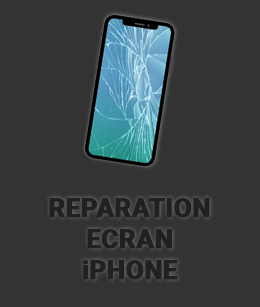
<style>
.page{position:relative;width:260px;height:307px;background:#333333}
.page>*{position:absolute;margin:0}
.t1{font:25.8px "Roboto-Black";color:#212121;font-weight:bold}
</style>
<div class="page">
<p class="t1" style="left:49px;top:198px;width:161px;height:82px;text-align:center">REPARATION<br>ECRAN<br>iPHONE</p>
</div>
